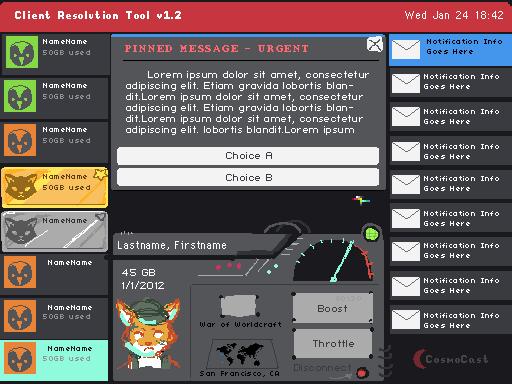
<style>
.page{position:relative;width:512px;height:384px;background:#545559}
.page>*{position:absolute;margin:0}
.t1{font:16px "Thixel";letter-spacing:0.05em;color:#ffffff}
.t2{font:16px "wondermail";letter-spacing:0.05em;color:#ffffff}
.t3{font:8px "04b03";letter-spacing:0.05em;color:#ffffff}
.t4{font:8px "04b03";letter-spacing:0.05em;color:#000000}
.t5{font:8px "04b03";letter-spacing:0.05em;color:#939395}
.t6{font:16px "WerdnasReturn";letter-spacing:0.05em;color:#ff6771}
.t7{font:8px/11px "PixelFJ8pt1Normal";letter-spacing:0.05em;color:#ffffff}
.t8{font:8px "PixelFJ8pt1Normal";letter-spacing:0.05em;color:#3a3b40}
.t9{font:8px "04b03";letter-spacing:0.05em;color:#5e400a}
.t10{font:8px "PixelFJ8pt1Normal";letter-spacing:0.05em;color:#ffffff}
.t11{font:8px "04b03";letter-spacing:0.05em;color:#9d9d9d}
.t12{font:16px "Thixel";letter-spacing:0.05em;color:#454547}
</style>
<div class="page">
<p class="t1" style="left:15px;top:11px;width:166px;height:8px">Client Resolution Tool v1.2</p>
<p class="t1" style="left:15px;top:11px;width:166px;height:8px">Client Resolution Tool v1.2</p>
<p class="t2" style="left:405px;top:11px;width:98px;height:8px">Wed Jan 24 18:42</p>
<p class="t2" style="left:405px;top:11px;width:98px;height:8px">Wed Jan 24 18:42</p>
<p class="t3" style="left:43px;top:39px;width:44px;height:5px">NameName</p>
<p class="t4" style="left:427px;top:39px;width:75px;height:15px">Notification Info<br>Goes Here</p>
<p class="t4" style="left:427px;top:39px;width:75px;height:15px">Notification Info<br>Goes Here</p>
<p class="t5" style="left:43px;top:50px;width:47px;height:5px">50GB used</p>
<p class="t6" style="left:125px;top:45px;width:183px;height:7px">PINNED MESSAGE - URGENT</p>
<p class="t6" style="left:125px;top:45px;width:183px;height:7px">PINNED MESSAGE - URGENT</p>
<p class="t7" style="left:126px;top:71px;width:243px;height:64px">Lorem ipsum dolor sit amet, consectetur adipiscing elit. Etiam gravida lobortis blandit.Lorem ipsum dolor sit amet, consectetur adipiscing elit. Etiam gravida lobortis blandit.Lorem ipsum dolor sit amet, consectetur adipiscing elit. lobortis blandit.Lorem ipsum dolor sit amet, consectetur adipiscing elit. Etiam gravida lobortis blandit.</p>
<p class="t3" style="left:424px;top:74px;width:75px;height:15px">Notification Info<br>Goes Here</p>
<p class="t3" style="left:424px;top:74px;width:75px;height:15px">Notification Info<br>Goes Here</p>
<p class="t3" style="left:43px;top:83px;width:44px;height:5px">NameName</p>
<p class="t5" style="left:43px;top:94px;width:47px;height:5px">50GB used</p>
<p class="t3" style="left:424px;top:109px;width:75px;height:15px">Notification Info<br>Goes Here</p>
<p class="t3" style="left:424px;top:109px;width:75px;height:15px">Notification Info<br>Goes Here</p>
<p class="t5" style="left:43px;top:138px;width:47px;height:5px">50GB used</p>
<p class="t3" style="left:424px;top:144px;width:75px;height:15px">Notification Info<br>Goes Here</p>
<p class="t3" style="left:424px;top:144px;width:75px;height:15px">Notification Info<br>Goes Here</p>
<p class="t8" style="left:226px;top:152px;width:46px;height:7px">Choice A</p>
<p class="t8" style="left:226px;top:174px;width:46px;height:7px">Choice B</p>
<p class="t9" style="left:43px;top:185px;width:47px;height:5px">50GB used</p>
<p class="t3" style="left:424px;top:176px;width:75px;height:15px">Notification Info<br>Goes Here</p>
<p class="t3" style="left:424px;top:211px;width:75px;height:15px">Notification Info<br>Goes Here</p>
<p class="t2" style="left:118px;top:241px;width:108px;height:9px">Lastname, Firstname</p>
<p class="t3" style="left:424px;top:243px;width:75px;height:15px">Notification Info<br>Goes Here</p>
<p class="t10" style="left:122px;top:269px;width:33px;height:7px">45 GB</p>
<p class="t10" style="left:122px;top:281px;width:42px;height:8px">1/1/2012</p>
<p class="t3" style="left:424px;top:278px;width:75px;height:15px">Notification Info<br>Goes Here</p>
<p class="t3" style="left:424px;top:278px;width:75px;height:15px">Notification Info<br>Goes Here</p>
<p class="t8" style="left:318px;top:305px;width:29px;height:7px">Boost</p>
<p class="t11" style="left:336px;top:296px;width:25px;height:5px">80x30</p>
<p class="t5" style="left:43px;top:314px;width:47px;height:5px">50GB used</p>
<p class="t3" style="left:424px;top:313px;width:75px;height:15px">Notification Info<br>Goes Here</p>
<p class="t4" style="left:200px;top:322px;width:81px;height:5px">War of Worldcraft</p>
<p class="t8" style="left:313px;top:340px;width:41px;height:7px">Throttle</p>
<p class="t5" style="left:43px;top:356px;width:47px;height:5px">50GB used</p>
<p class="t8" style="left:294px;top:364px;width:57px;height:7px">Disconnect</p>
<p class="t12" style="left:426px;top:355px;width:62px;height:8px">CosmoCast</p>
<p class="t12" style="left:426px;top:355px;width:62px;height:8px">CosmoCast</p>
<p class="t4" style="left:200px;top:371px;width:79px;height:6px">San Francisco, CA</p>
</div>
